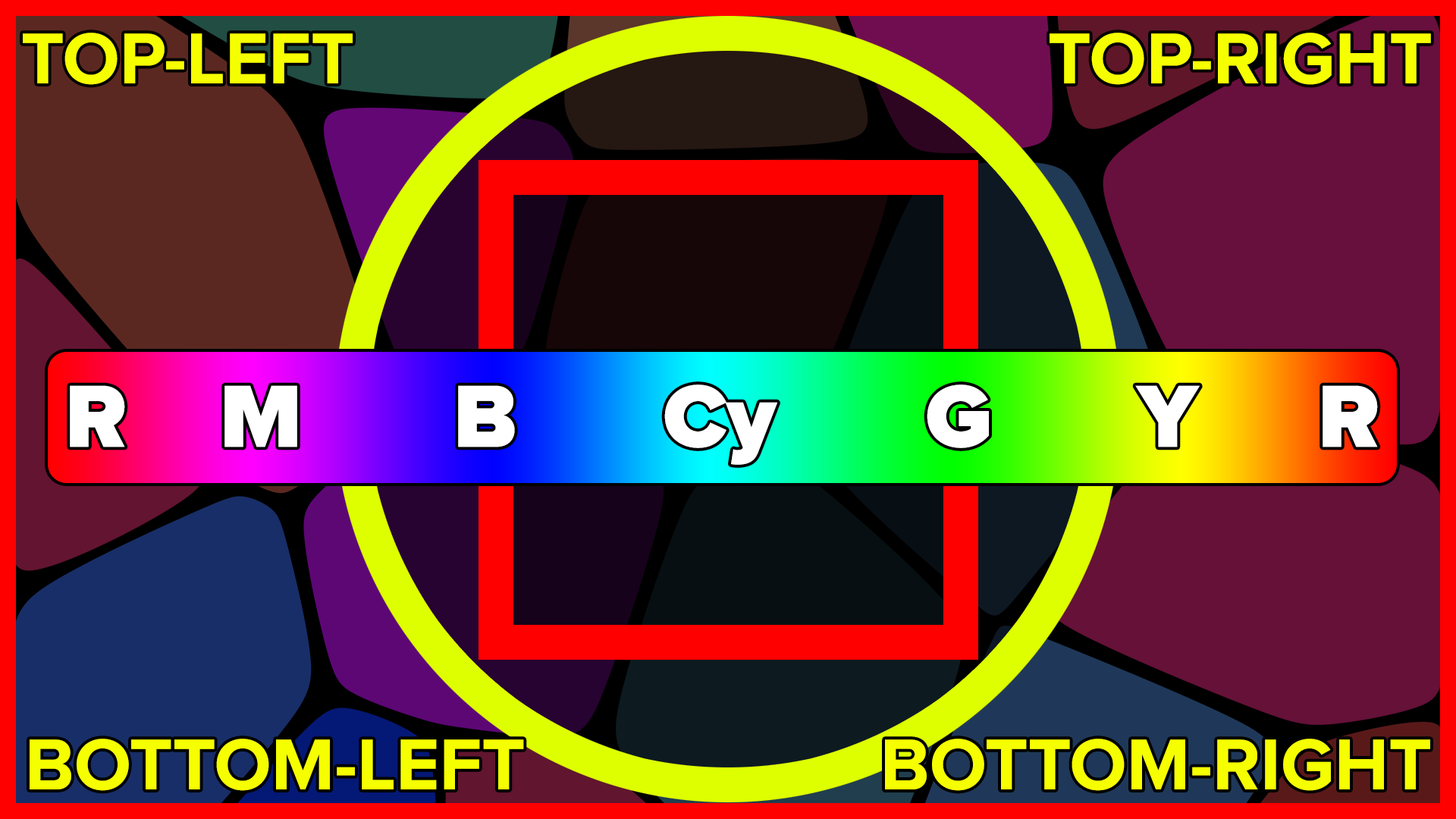
<style>
.page{position:relative;width:1456px;height:819px}
.page>*{position:absolute;margin:0}
.t1{font:74.4px "ProximaNova-Bold";color:#f6ff00}
.t2{font:91.3px "ProximaNova-Black";color:#ffffff}
</style>
<div class="page">
<p class="t1" style="left:23px;top:33px;width:330px;height:52px">TOP-LEFT</p>
<p class="t1" style="left:1050px;top:33px;width:381px;height:52px">TOP-RIGHT</p>
<p class="t2" style="left:70px;top:385px;width:55px;height:62px">R</p>
<p class="t2" style="left:224px;top:385px;width:73px;height:62px">M</p>
<p class="t2" style="left:458px;top:385px;width:57px;height:62px">B</p>
<p class="t2" style="left:664px;top:384px;width:113px;height:81px">Cy</p>
<p class="t2" style="left:927px;top:384px;width:62px;height:64px">G</p>
<p class="t2" style="left:1135px;top:385px;width:65px;height:62px">Y</p>
<p class="t2" style="left:1323px;top:385px;width:55px;height:62px">R</p>
<p class="t1" style="left:30px;top:739px;width:494px;height:52px">BOTTOM-LEFT</p>
<p class="t1" style="left:885px;top:739px;width:545px;height:52px">BOTTOM-RIGHT</p>
</div>
